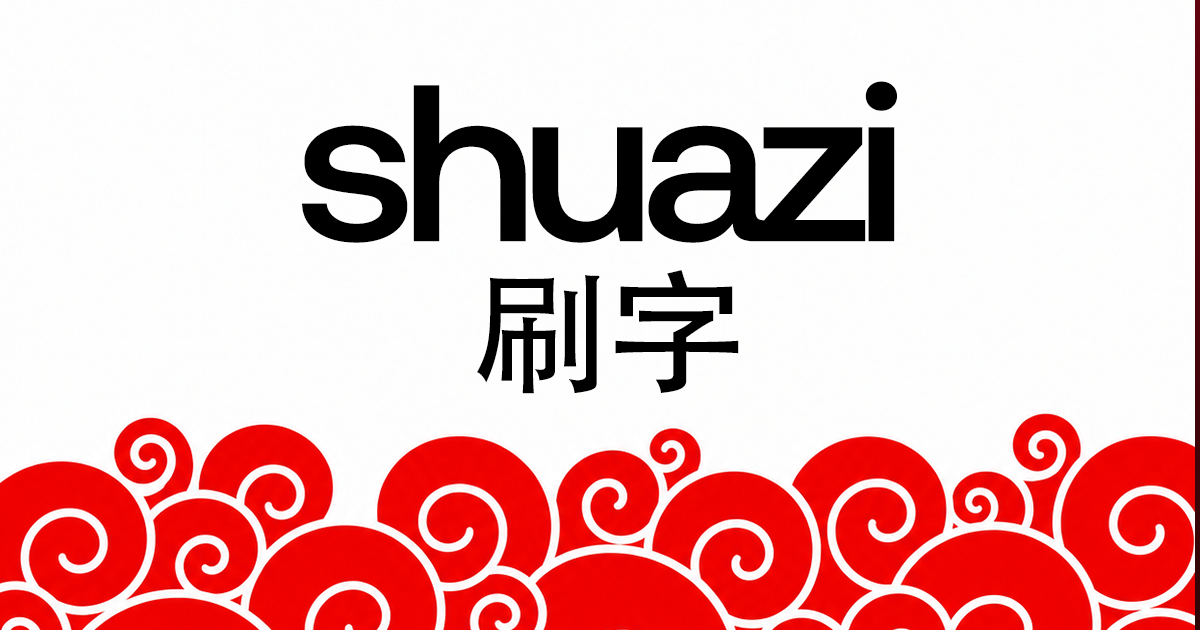
<style>
.page{position:relative;width:1200px;height:630px}
.page>*{position:absolute;margin:0}
.t1{font:222.5px "Aeonik-Medium";letter-spacing:-0.06em;color:#000000;scale:1.06 1}
.t2{font:133.5px "AdobeHeitiStd-Regular";letter-spacing:-0.06em;color:#000000;scale:1.06 1}
</style>
<div class="page">
<p class="t1" style="left:302px;top:81px;width:595px;height:162px">shuazi</p>
<p class="t2" style="left:477px;top:270px;width:262px;height:124px">刷字</p>
</div>
